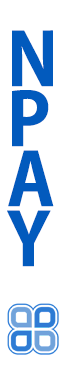
<style>
.page{position:relative;width:64px;height:378px;background:#ffffff}
.page>*{position:absolute;margin:0}
.t1{font:72px/60px "AdobeGothicStd-Bold";color:#025abd;font-weight:bold}
</style>
<div class="page">
<p class="t1" style="left:7px;top:30px;width:47px;height:237px">N<br>P<br>A<br>Y</p>
</div>
